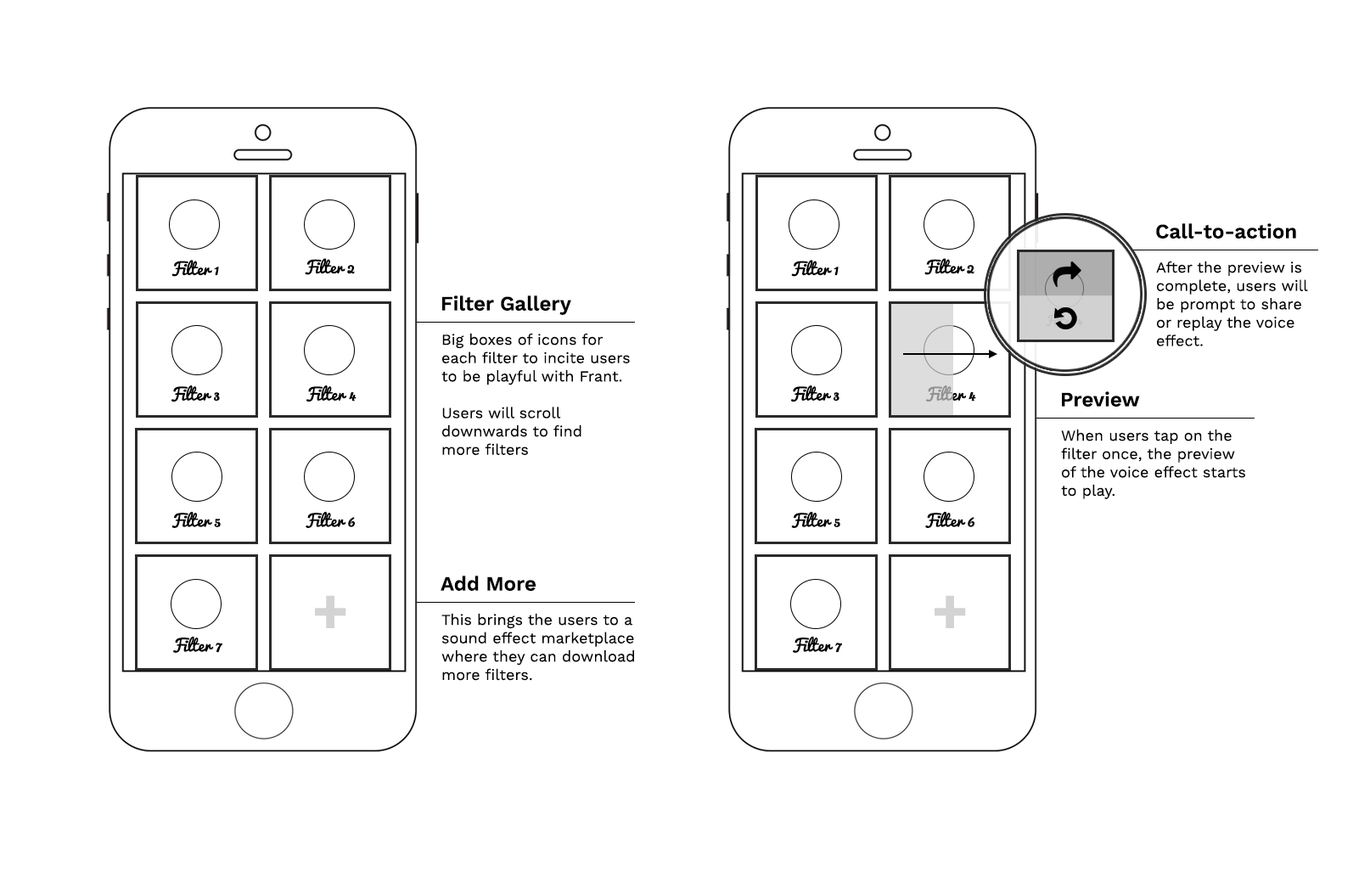
<style>
.page{position:relative;width:1370px;height:871px;background:#ffffff}
.page>*{position:absolute;margin:0}
.t1{font:20.4px "WorkSans-SemiBold";color:#000000}
.t2{font:16.1px "Pacifico-Regular";color:#000000}
.t3{font:15.3px "WorkSans-Regular";color:#000000}
.t4{font:16.1px "Pacifico-Regular"}
</style>
<div class="page">
<p class="t1" style="left:1156px;top:223px;width:140px;height:15px">Call-to-action</p>
<p class="t2" style="left:305px;top:258px;width:50px;height:17px">Filter 2</p>
<p class="t2" style="left:924px;top:258px;width:50px;height:17px">Filter 2</p>
<p class="t2" style="left:171px;top:260px;width:48px;height:17px">Filter 1</p>
<p class="t2" style="left:791px;top:260px;width:47px;height:17px">Filter 1</p>
<p class="t3" style="left:1156px;top:261px;width:152px;height:85px">After the preview is complete, users will <br>be prompt to share <br>or replay the voice <br>effect.</p>
<p class="t1" style="left:442px;top:295px;width:129px;height:20px">Filter Gallery</p>
<p class="t3" style="left:441px;top:333px;width:189px;height:122px">Big boxes of icons for each filter to incite users <br>to be playful with Frant.<br><br>Users will scroll downwards to find <br>more filters</p>
<p class="t2" style="left:171px;top:385px;width:49px;height:17px">Filter 3</p>
<p class="t2" style="left:306px;top:385px;width:50px;height:17px">Filter 4</p>
<p class="t2" style="left:790px;top:385px;width:49px;height:17px">Filter 3</p>
<p class="t4" style="left:926px;top:385px;width:50px;height:17px">Filter 4</p>
<p class="t1" style="left:1062px;top:391px;width:78px;height:15px">Preview</p>
<p class="t3" style="left:1061px;top:429px;width:184px;height:70px">When users tap on the filter once, the preview<br>of the voice effect starts to play.</p>
<p class="t2" style="left:171px;top:511px;width:50px;height:17px">Filter 5</p>
<p class="t2" style="left:305px;top:511px;width:50px;height:17px">Filter 6</p>
<p class="t2" style="left:791px;top:511px;width:49px;height:17px">Filter 5</p>
<p class="t2" style="left:925px;top:511px;width:49px;height:17px">Filter 6</p>
<p class="t1" style="left:440px;top:575px;width:95px;height:16px">Add More</p>
<p class="t3" style="left:441px;top:613px;width:193px;height:68px">This brings the users to a sound effect marketplace where they can download more filters.</p>
<p class="t2" style="left:173px;top:636px;width:49px;height:17px">Filter 7</p>
<p class="t2" style="left:793px;top:636px;width:49px;height:17px">Filter 7</p>
</div>
